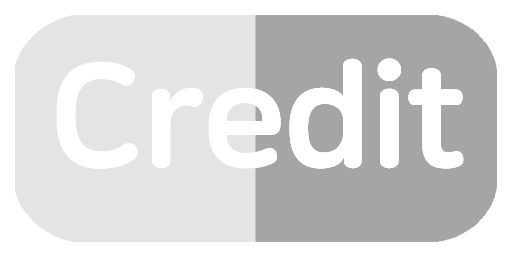
<style>
.page{position:relative;width:512px;height:256px;background:#e4e4e4}
.page>*{position:absolute;margin:0}
.t1{font:145.8px "NanumSquareRoundEB";letter-spacing:-0.025em;color:#ffffff}
</style>
<div class="page">
<p class="t1" style="left:56px;top:58px;width:408px;height:111px">Credit</p>
</div>
